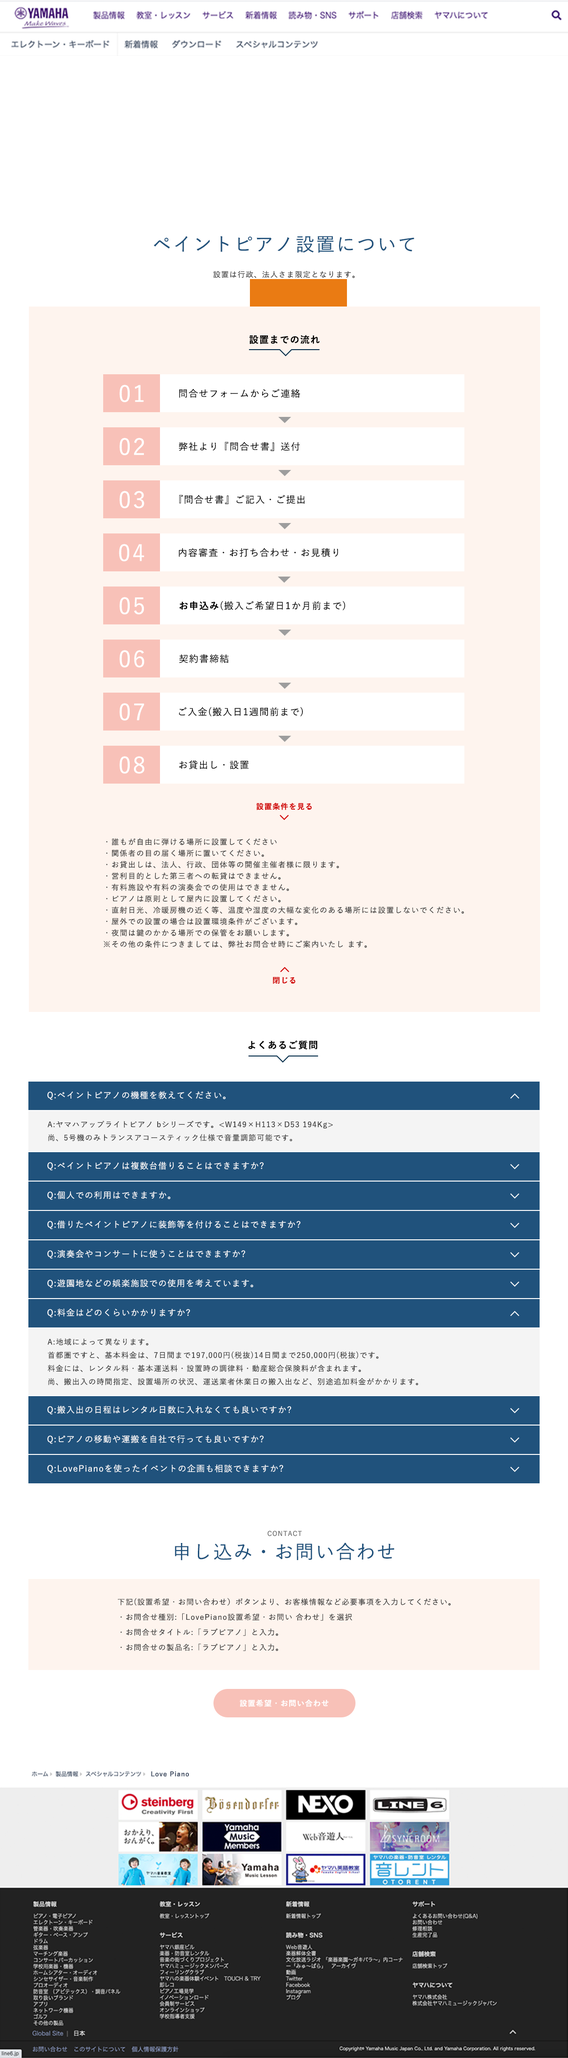
<style>
.page{position:relative;width:568px;height:2058px;background:#ffffff}
.page>*{position:absolute;margin:0}
.t1{font:18.9px "YuGo-Medium";letter-spacing:0.08em;color:#20527c}
.t2{font:7.6px "YuGo-Medium";letter-spacing:0.08em;color:#333333}
.t3{font:9.5px "YuGo-Bold";letter-spacing:0.08em;color:#000000}
.t4{font:22.7px "YuGo-Medium";letter-spacing:0.08em;color:#ffffff}
.t5{font:9.5px "YuGo-Medium";letter-spacing:0.08em;color:#000000}
.t6{font:7.6px "YuGo-Bold";letter-spacing:0.08em;color:#d10000}
.t7{font:7.6px/11.4px "YuGo-Medium";letter-spacing:0.1em;color:#333333}
.t8{font:8.5px "YuGo-Medium";letter-spacing:0.08em;color:#ffffff}
.t9{font:7.6px/13.3px "YuGo-Medium";letter-spacing:0.08em;color:#333333}
.t10{font:6.6px "YuGo-Medium";letter-spacing:0.08em;color:#666666}
.t11{font:7.6px/15.2px "YuGo-Medium";letter-spacing:0.08em;color:#333333}
.t12{font:7.6px "YuGo-Bold";letter-spacing:0.08em;color:#ffffff}
.t13{font:6.3px "YuGo-Bold";letter-spacing:0.08em;color:#445166}
</style>
<div class="page">
<p class="t1" style="left:154px;top:236px;width:260px;height:17px">ペイントピアノ設置について</p>
<p class="t2" style="left:213px;top:270px;width:142px;height:8px">設置は行政、法人さま限定となります。</p>
<p class="t3" style="left:250px;top:335px;width:70px;height:9px">設置までの流れ</p>
<p class="t4" style="left:119px;top:385px;width:25px;height:17px">01</p>
<p class="t5" style="left:179px;top:388px;width:121px;height:10px">問合せフォームからご連絡</p>
<p class="t4" style="left:119px;top:438px;width:25px;height:17px">02</p>
<p class="t5" style="left:179px;top:441px;width:121px;height:10px">弊社より『問合せ書』送付</p>
<p class="t4" style="left:119px;top:491px;width:25px;height:17px">03</p>
<p class="t5" style="left:179px;top:495px;width:126px;height:9px">『問合せ書』ご記入・ご提出</p>
<p class="t4" style="left:119px;top:544px;width:25px;height:17px">04</p>
<p class="t5" style="left:179px;top:548px;width:159px;height:9px">内容審査・お打ち合わせ・お見積り</p>
<p class="t4" style="left:119px;top:597px;width:25px;height:17px">05</p>
<p class="t5" style="left:180px;top:601px;width:165px;height:10px"><span class="t3">お申込み</span>(搬入ご希望日1か月前まで)</p>
<p class="t4" style="left:119px;top:650px;width:25px;height:17px">06</p>
<p class="t5" style="left:179px;top:654px;width:50px;height:9px">契約書締結</p>
<p class="t4" style="left:119px;top:703px;width:25px;height:17px">07</p>
<p class="t5" style="left:179px;top:707px;width:124px;height:10px">ご入金(搬入日1週間前まで)</p>
<p class="t4" style="left:119px;top:756px;width:25px;height:18px">08</p>
<p class="t5" style="left:179px;top:760px;width:70px;height:9px">お貸出し・設置</p>
<p class="t6" style="left:256px;top:802px;width:56px;height:8px">設置条件を見る</p>
<p class="t7" style="left:104px;top:838px;width:360px;height:110px">・誰もが自由に弾ける場所に設置してください<br>・関係者の目の届く場所に置いてください。 <br>・お貸出しは、法人、行政、団体等の開催主催者様に限ります。 <br>・営利目的とした第三者への転貸はできません。 <br>・有料施設や有料の演奏会での使用はできません。 <br>・ピアノは原則として屋内に設置してください。 <br>・直射日光、冷暖房機の近く等、温度や湿度の大幅な変化のある場所には設置しないでください。 <br>・屋外での設置の場合は設置環境条件がございます。 <br>・夜間は鍵のかかる場所での保管をお願いします。 <br>※その他の条件につきましては、弊社お問合せ時にご案内いたし ます。</p>
<p class="t6" style="left:273px;top:977px;width:23px;height:7px">閉じる</p>
<p class="t3" style="left:248px;top:1040px;width:70px;height:9px">よくあるご質問</p>
<p class="t8" style="left:47px;top:1091px;width:179px;height:9px">Q:ペイントピアノの機種を教えてください。</p>
<p class="t9" style="left:47px;top:1120px;width:286px;height:21px">A:ヤマハアップライトピアノ bシリーズです。&lt;W149×H113×D53 194Kg&gt;<br>尚、5号機のみトランスアコースティック仕様で音量調節可能です。</p>
<p class="t8" style="left:47px;top:1161px;width:217px;height:9px">Q:ペイントピアノは複数台借りることはできますか?</p>
<p class="t8" style="left:47px;top:1191px;width:124px;height:9px">Q:個人での利用はできますか。</p>
<p class="t8" style="left:47px;top:1220px;width:254px;height:9px">Q:借りたペイントピアノに装飾等を付けることはできますか?</p>
<p class="t8" style="left:47px;top:1250px;width:198px;height:9px">Q:演奏会やコンサートに使うことはできますか?</p>
<p class="t8" style="left:47px;top:1279px;width:206px;height:9px">Q:遊園地などの娯楽施設での使用を考えています。</p>
<p class="t8" style="left:47px;top:1308px;width:143px;height:9px">Q:料金はどのくらいかかりますか?</p>
<p class="t9" style="left:47px;top:1338px;width:372px;height:47px">A:地域によって異なります。<br>首都圏ですと、基本料金は、7日間まで197,000円(税抜)14日間まで250,000円(税抜)です。 <br>料金には、レンタル料・基本運送料・設置時の調律料・動産総合保険料が含まれます。 <br>尚、搬出入の時間指定、設置場所の状況、運送業者休業日の搬入出など、別途追加料金がかかります。</p>
<p class="t8" style="left:47px;top:1405px;width:244px;height:9px">Q:搬入出の日程はレンタル日数に入れなくても良いですか?</p>
<p class="t8" style="left:47px;top:1435px;width:217px;height:9px">Q:ピアノの移動や運搬を自社で行っても良いですか?</p>
<p class="t8" style="left:47px;top:1464px;width:237px;height:9px">Q:LovePianoを使ったイベントの企画も相談できますか?</p>
<p class="t10" style="left:268px;top:1530px;width:34px;height:6px">CONTACT</p>
<p class="t1" style="left:175px;top:1542px;width:220px;height:18px">申し込み・お問い合わせ</p>
<p class="t11" style="left:118px;top:1598px;width:333px;height:53px">下記(設置希望・お問い合わせ）ボタンより、お客様情報など必要事項を入力してください。<br>・お問合せ種別:「LovePiano設置希望・お問い 合わせ」を選択<br>・お問合せタイトル:「ラブピアノ」と入力。<br>・お問合せの製品名:「ラブピアノ」と入力。</p>
<p class="t12" style="left:240px;top:1699px;width:89px;height:8px">設置希望・お問い合わせ</p>
<p class="t13" style="left:151px;top:1771px;width:38px;height:5px">Love Piano</p>
</div>
